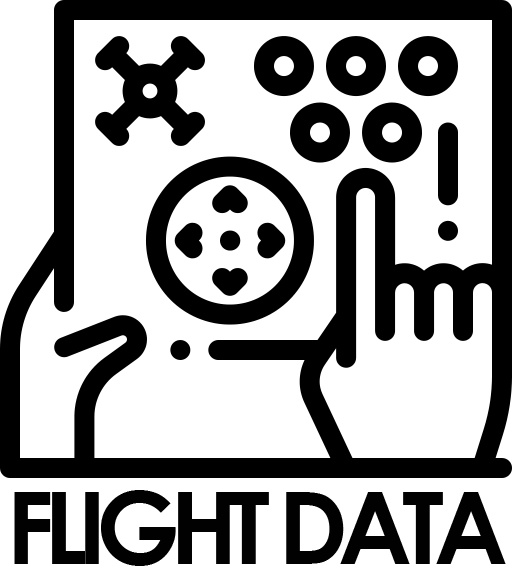
<style>
.page{position:relative;width:512px;height:576px;background:#ffffff}
.page>*{position:absolute;margin:0}
.t1{font:100px "CenturyGothic-Bold";letter-spacing:-0.1em;color:#010101}
</style>
<div class="page">
<p class="t1" style="left:14px;top:490px;width:492px;height:76px">FLIGHT DATA</p>
</div>
